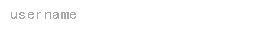
<style>
.page{position:relative;width:260px;height:30px;background:#ffffff}
.page>*{position:absolute;margin:0}
.t1{font:16px "SimHei";letter-spacing:0.03em;color:#a8a8a8}
</style>
<div class="page">
<p class="t1" style="left:11px;top:12px;width:65px;height:7px">username</p>
</div>
